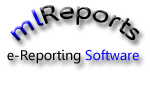
<style>
.page{position:relative;width:150px;height:100px;background:#ffffff}
.page>*{position:absolute;margin:0}
.t1{font:24px "Gisha"}
.t2{font:14px "Gisha";color:#000000}
.t3{font:14px "Gisha";color:#0404fb}
</style>
<div class="page">
<p class="t1" style="left:10px;top:5px;width:130px;height:36px">mlReports</p>
<p class="t2" style="left:7px;top:49px;width:132px;height:15px">e-Reporting <span class="t3">Software</span></p>
</div>
